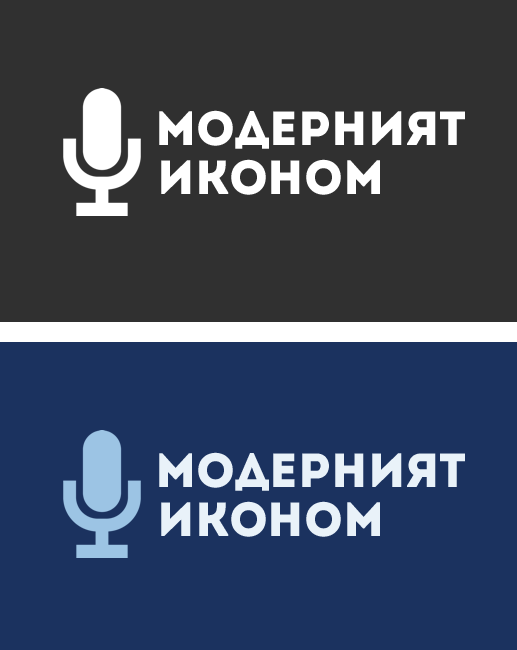
<style>
.page{position:relative;width:517px;height:650px;background:#303030}
.page>*{position:absolute;margin:0}
.t1{font:48px "Intro";color:#ffffff}
.t2{font:48px "Intro";color:#e9f2f9}
</style>
<div class="page">
<p class="t1" style="left:159px;top:110px;width:306px;height:39px">Модерният</p>
<p class="t1" style="left:161px;top:159px;width:219px;height:36px">иконом</p>
<p class="t2" style="left:159px;top:452px;width:306px;height:39px">Модерният</p>
<p class="t2" style="left:161px;top:501px;width:219px;height:36px">иконом</p>
</div>
